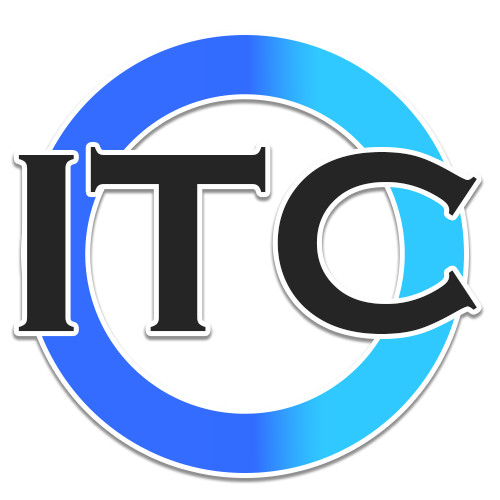
<style>
.page{position:relative;width:500px;height:500px;background:#ffffff}
.page>*{position:absolute;margin:0}
.t1{font:263.6px "CopperplateGothic-Bold";color:#252525}
</style>
<div class="page">
<p class="t1" style="left:18px;top:147px;width:459px;height:187px">ITC</p>
</div>
